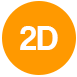
<style>
.page{position:relative;width:77px;height:77px;background:#ff9900}
.page>*{position:absolute;margin:0}
.t1{font:35.4px "CoolveticaRg-Regular";color:#ffffff}
</style>
<div class="page">
<p class="t1" style="left:20px;top:26px;width:38px;height:24px">2D</p>
</div>
